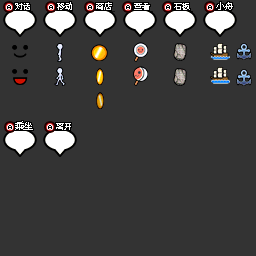
<style>
.page{position:relative;width:256px;height:256px;background:#333333}
.page>*{position:absolute;margin:0}
.t1{font:8px "ZpixEX2";color:#ffffff}
.t2{font:9px "ZpixEX2";color:#ffffff}
</style>
<div class="page">
<p class="t1" style="left:15px;top:3px;width:15px;height:7px">对话</p>
<p class="t1" style="left:15px;top:3px;width:15px;height:7px">对话</p>
<p class="t1" style="left:57px;top:2px;width:15px;height:8px">移动</p>
<p class="t1" style="left:57px;top:2px;width:15px;height:8px">移动</p>
<p class="t1" style="left:96px;top:2px;width:16px;height:8px">商店</p>
<p class="t1" style="left:96px;top:2px;width:16px;height:8px">商店</p>
<p class="t1" style="left:134px;top:3px;width:16px;height:7px">查看</p>
<p class="t1" style="left:134px;top:3px;width:16px;height:7px">查看</p>
<p class="t1" style="left:174px;top:3px;width:16px;height:7px">石板</p>
<p class="t1" style="left:174px;top:3px;width:16px;height:7px">石板</p>
<p class="t2" style="left:216px;top:2px;width:17px;height:8px">小<span class="t1">舟</span></p>
<p class="t2" style="left:216px;top:2px;width:17px;height:8px">小<span class="t1">舟</span></p>
<p class="t2" style="left:15px;top:121px;width:18px;height:9px">乘坐</p>
<p class="t1" style="left:56px;top:123px;width:15px;height:7px">离开</p>
<p class="t1" style="left:56px;top:123px;width:15px;height:7px">离开</p>
</div>
